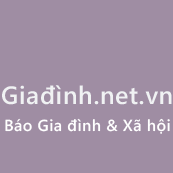
<style>
.page{position:relative;width:173px;height:173px;background:#9f8da3}
.page>*{position:absolute;margin:0}
.t1{font:25px "SegoeWP-Semibold";letter-spacing:0.025em;color:#f0f3f4}
.t2{font:16px "SegoeWP-Semibold";letter-spacing:0.025em;color:#ffffff}
</style>
<div class="page">
<p class="t1" style="left:2px;top:85px;width:170px;height:20px">Giađình.net.vn</p>
<p class="t2" style="left:5px;top:118px;width:165px;height:16px">Báo Gia đình &amp; Xã hội</p>
</div>
